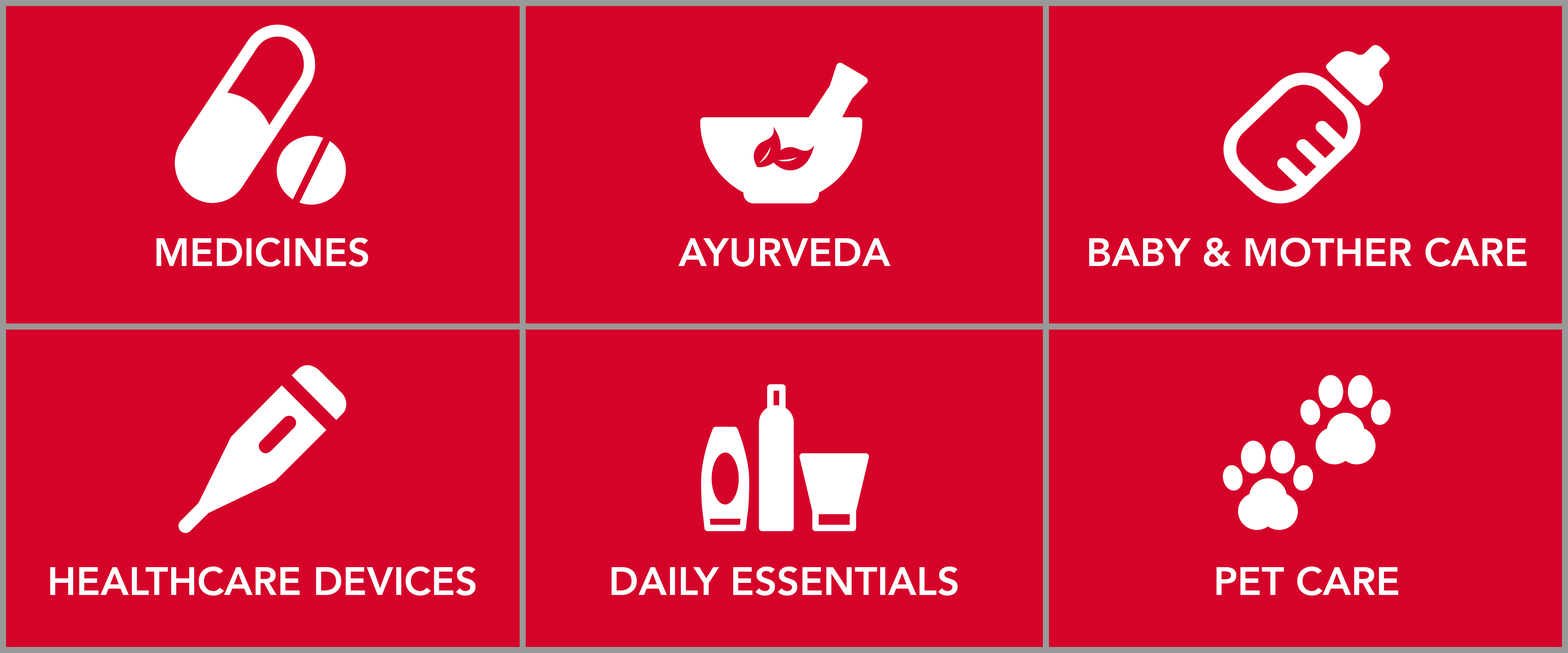
<style>
.page{position:relative;width:1568px;height:653px;background:#d50329}
.page>*{position:absolute;margin:0}
.t1{font:39.3px "Avenir-Heavy";color:#ffffff}
</style>
<div class="page">
<p class="t1" style="left:156px;top:238px;width:212px;height:29px">MEDICINES</p>
<p class="t1" style="left:678px;top:238px;width:212px;height:29px">AYURVEDA</p>
<p class="t1" style="left:1089px;top:238px;width:438px;height:29px">BABY &amp; MOTHER CARE</p>
<p class="t1" style="left:50px;top:567px;width:425px;height:29px">HEALTHCARE DEVICES</p>
<p class="t1" style="left:612px;top:567px;width:346px;height:29px">DAILY ESSENTIALS</p>
<p class="t1" style="left:1217px;top:567px;width:181px;height:29px">PET CARE</p>
</div>
